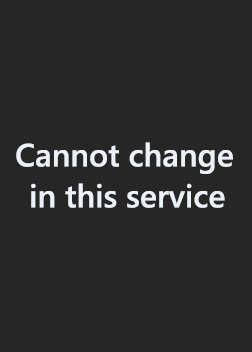
<style>
.page{position:relative;width:252px;height:352px;background:#262626}
.page>*{position:absolute;margin:0}
.t1{font:32px "YuGothicUI-Semibold";color:#edf1f9}
</style>
<div class="page">
<p class="t1" style="left:16px;top:142px;width:217px;height:32px">Cannot change</p>
<p class="t1" style="left:31px;top:183px;width:194px;height:25px">in this service</p>
</div>
